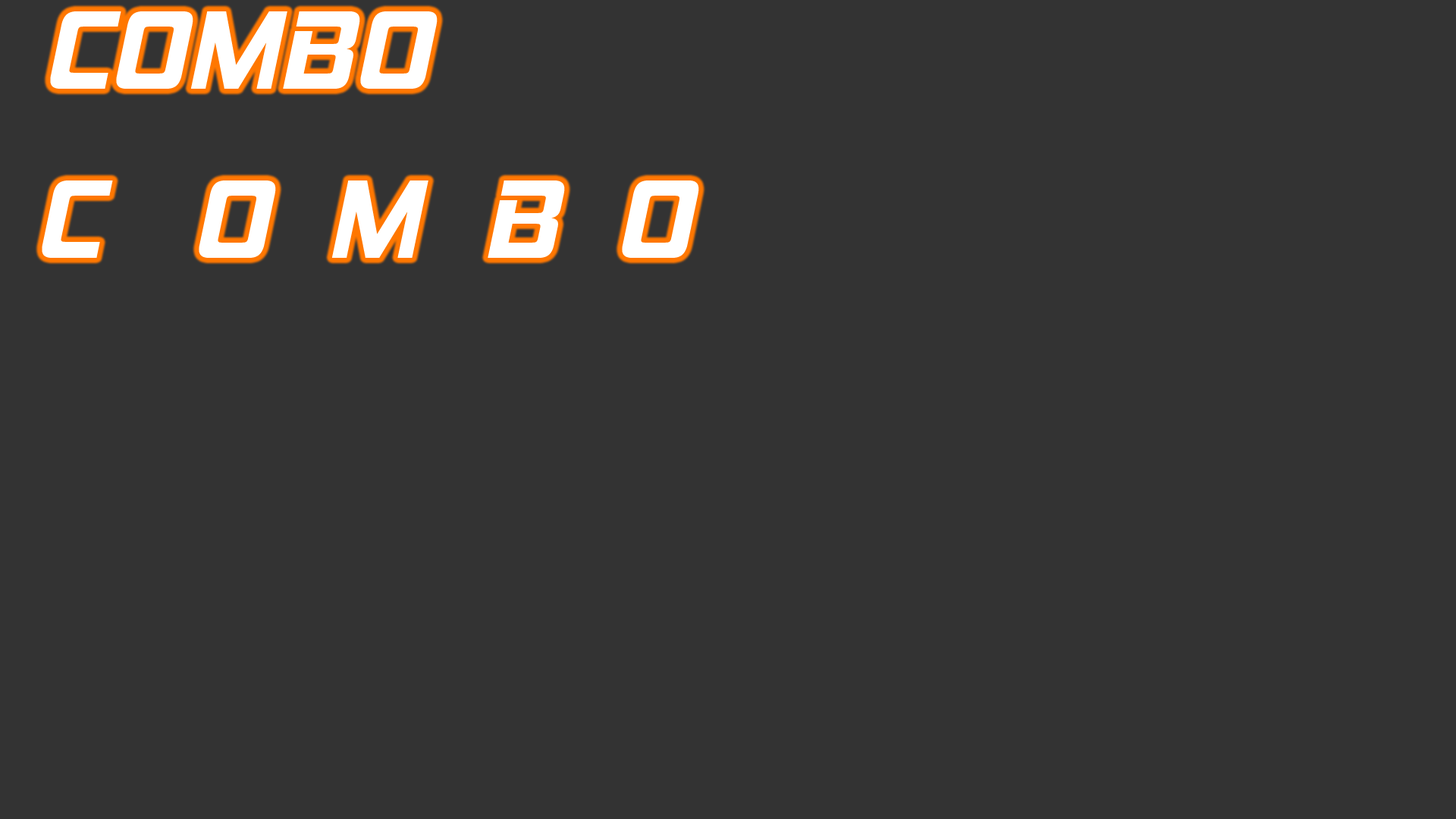
<style>
.page{position:relative;width:1456px;height:819px;background:#333333}
.page>*{position:absolute;margin:0}
.t1{font:113.7px "HemiHeadRg-BoldItalic";color:#ffffff}
</style>
<div class="page">
<p class="t1" style="left:50px;top:11px;width:388px;height:78px">COMBO</p>
<p class="t1" style="left:42px;top:180px;width:71px;height:78px">C</p>
<p class="t1" style="left:199px;top:180px;width:77px;height:78px">O</p>
<p class="t1" style="left:331px;top:180px;width:97px;height:78px">M</p>
<p class="t1" style="left:488px;top:180px;width:77px;height:78px">B</p>
<p class="t1" style="left:622px;top:180px;width:77px;height:78px">O</p>
</div>
